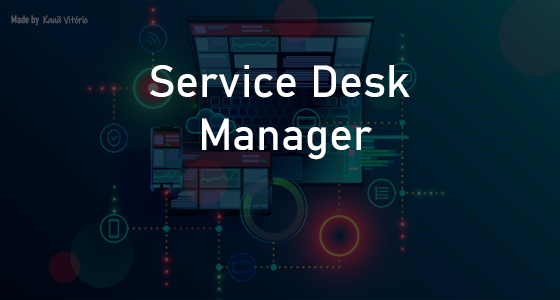
<style>
.page{position:relative;width:560px;height:300px}
.page>*{position:absolute;margin:0}
.t1{font:10.4px "Bahnschrift";color:#585c63;scale:0.73 1}
.t2{font:10.2px "InkFree";color:#585d65;scale:0.86 1}
.t3{font:44.6px "Bahnschrift";color:#ffffff}
</style>
<div class="page">
<p class="t1" style="left:11px;top:15px;width:28px;height:11px">Made by</p>
<p class="t2" style="left:43px;top:15px;width:45px;height:9px">Kauã Vitório</p>
<p class="t3" style="left:150px;top:65px;width:260px;height:95px">Service Desk<br>   Manager</p>
</div>
